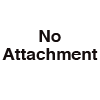
<style>
.page{position:relative;width:100px;height:100px;background:#ffffff}
.page>*{position:absolute;margin:0}
.t1{font:15.6px "Helvetica-Bold";color:#150e0e;scale:1.11 1}
</style>
<div class="page">
<p class="t1" style="left:2px;top:30px;width:96px;height:30px;text-align:center">No<br>Attachment</p>
</div>
